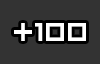
<style>
.page{position:relative;width:100px;height:64px;background:#333333}
.page>*{position:absolute;margin:0}
.t1{font:36px "VisitorTT1BRK";color:#ffffff}
</style>
<div class="page">
<p class="t1" style="left:14px;top:23px;width:72px;height:18px">+100</p>
</div>
